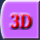
<style>
.page{position:relative;width:40px;height:40px;background:#c864ff}
.page>*{position:absolute;margin:0}
.t1{font:18px "MyungjoXB-HM"}
</style>
<div class="page">
<p class="t1" style="left:10px;top:14px;width:21px;height:14px">3D</p>
</div>
